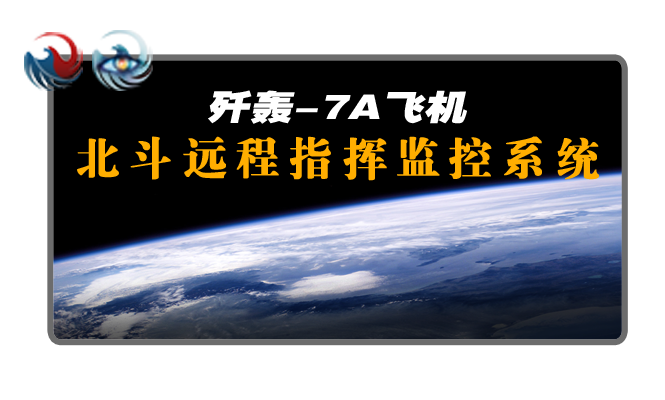
<style>
.page{position:relative;width:665px;height:400px;background:#ffffff}
.page>*{position:absolute;margin:0}
.t1{font:34.2px "FZCCHJW--GB1-0";color:#ffffff;font-style:italic;scale:1.24 1}
.t2{font:45.6px "FZDBSJW--GB1-0";letter-spacing:0.18em;color:#ffae00;font-weight:bold;scale:0.97 1}
</style>
<div class="page">
<p class="t1" style="left:208px;top:90px;width:259px;height:34px">歼轰-7A飞机</p>
<p class="t2" style="left:77px;top:136px;width:522px;height:45px">北斗远程指挥监控系统</p>
</div>
